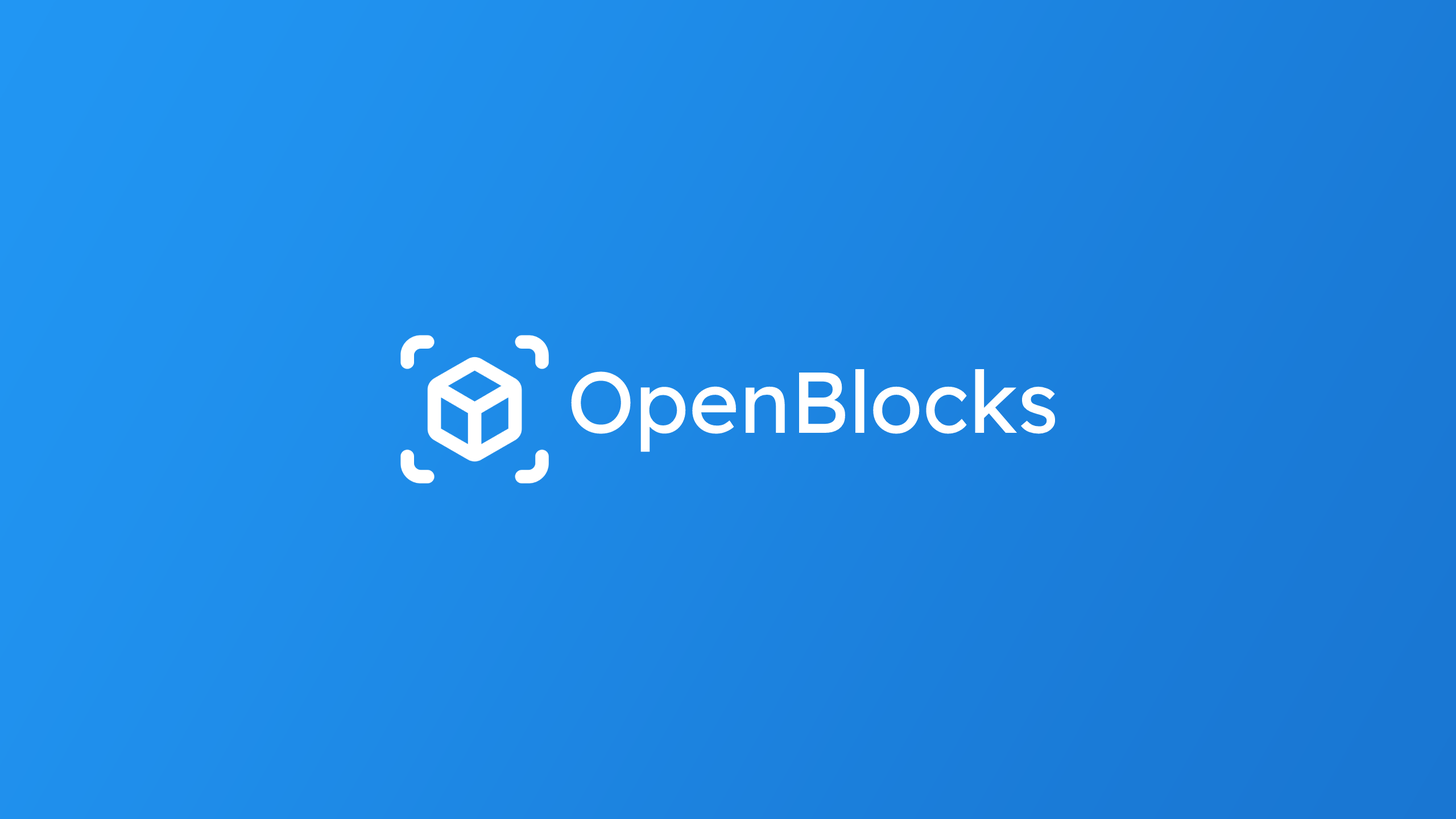
<style>
.page{position:relative;width:1456px;height:819px}
.page>*{position:absolute;margin:0}
.t1{font:86.1px "LexendDeca-Regular";color:#ffffff}
</style>
<div class="page">
<p class="t1" style="left:571px;top:369px;width:485px;height:83px">OpenBlocks</p>
</div>
